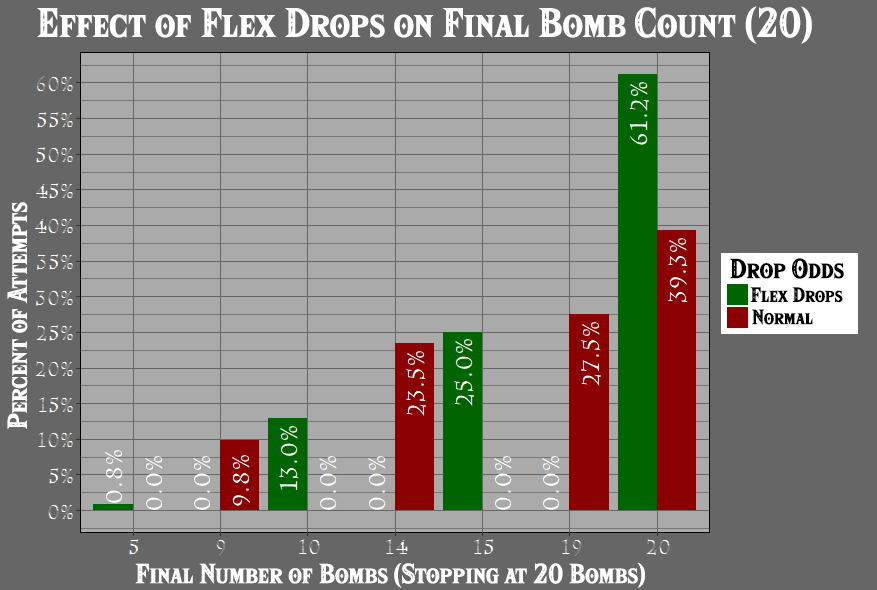
<style>
.page{position:relative;width:877px;height:590px;background:#aaaaaa}
.page>*{position:absolute;margin:0}
.t1{font:36px "HyliaSerifBeta-Regular";color:#ffffff}
.t2{font:24px "HyliaSerifBeta-Regular";color:#ffffff}
.t3{font:24px "HyliaSerifBeta-Regular";color:#000000}
.t4{font:18px "HyliaSerifBeta-Regular";color:#000000}
</style>
<div class="page">
<p class="t1" style="left:37px;top:6px;width:775px;height:38px">Effect of Flex Drops on Final Bomb Count (20)</p>
<p class="t2" style="left:7px;top:202px;width:21px;height:227px;rotate:-90deg">Percent of Attempts</p>
<p class="t3" style="left:730px;top:258px;width:114px;height:21px">Drop Odds</p>
<p class="t4" style="left:750px;top:287px;width:93px;height:16px">Flex Drops</p>
<p class="t4" style="left:752px;top:309px;width:61px;height:16px">Normal</p>
<p class="t2" style="left:135px;top:562px;width:510px;height:26px">Final Number of Bombs (Stopping at 20 Bombs)</p>
</div>
